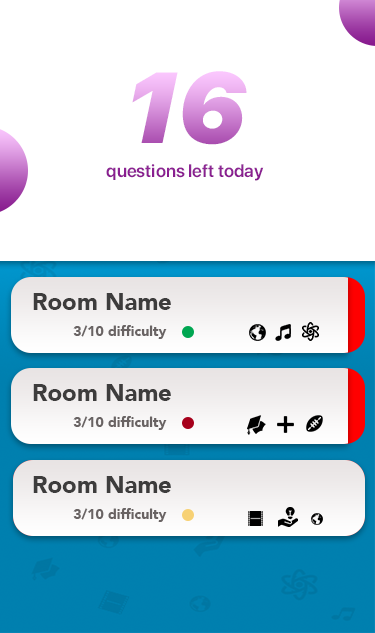
<style>
.page{position:relative;width:375px;height:633px;background:#ffffff}
.page>*{position:absolute;margin:0}
.t1{font:18px "SFProDisplay-Semibold"}
.t2{font:100px "SFProDisplay-BlackItalic"}
.t3{font:24px "Avenir-Black";color:#3d3c3c}
.t4{font:14px "Avenir-Black";color:#696363}
</style>
<div class="page">
<p class="t1" style="left:106px;top:71px;width:158px;height:110px;text-align:center"><span class="t2">16<br><br></span>questions left today</p>
<p class="t3" style="left:33px;top:293px;width:138px;height:17px">Room Name</p>
<p class="t4" style="left:73px;top:325px;width:94px;height:14px">3/10 difficulty</p>
<p class="t3" style="left:33px;top:384px;width:138px;height:17px">Room Name</p>
<p class="t4" style="left:73px;top:416px;width:94px;height:14px">3/10 difficulty</p>
<p class="t3" style="left:33px;top:476px;width:138px;height:17px">Room Name</p>
<p class="t4" style="left:73px;top:508px;width:94px;height:14px">3/10 difficulty</p>
</div>
